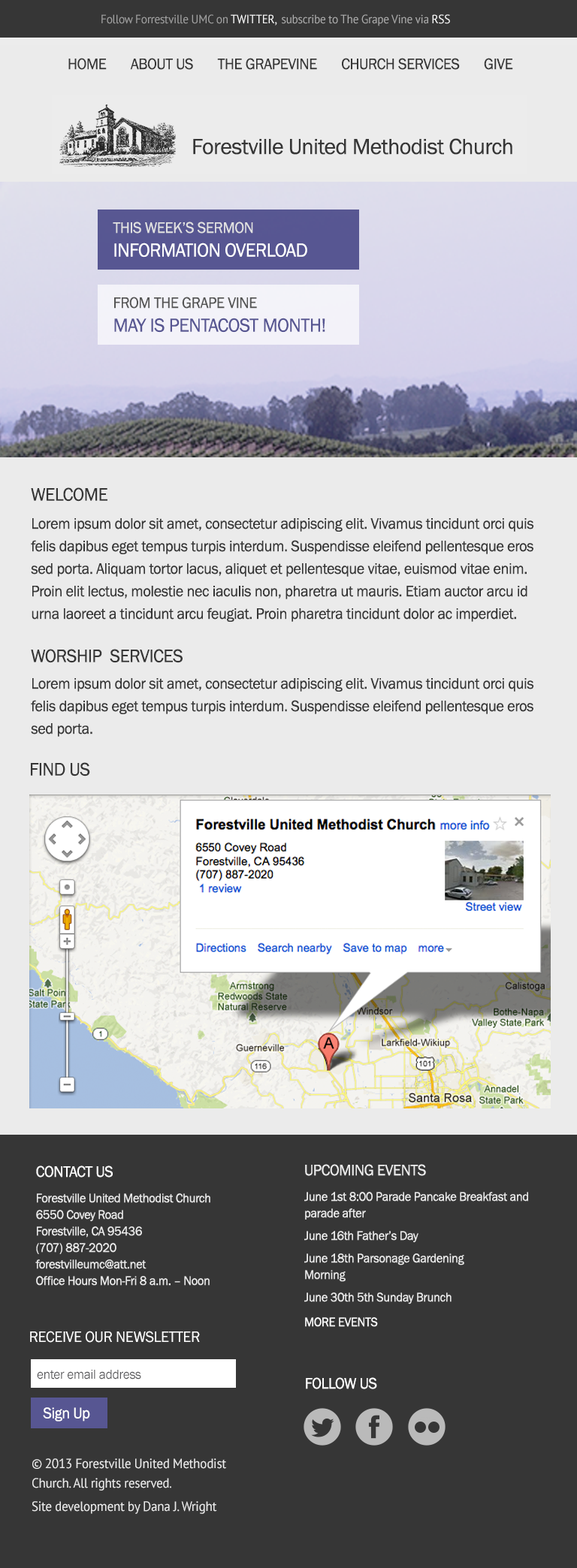
<style>
.page{position:relative;width:577px;height:1568px;background:#363636}
.page>*{position:absolute;margin:0}
.t1{font:15.8px "FranklinGothic-Book";letter-spacing:-0.02em;color:#363636;scale:0.96 1}
.t2{font:18.8px "FranklinGothic-Book";letter-spacing:-0.02em;color:#363636;scale:0.96 1}
.t3{font:15.8px/22.5px "FranklinGothic-Book";letter-spacing:-0.02em;color:#363636;scale:0.96 1}
.t4{font:12.8px/16.5px "FranklinGothic-Book";letter-spacing:-0.02em;color:#ebebeb;scale:0.96 1}
.t5{font:15.8px/6.5px "FranklinGothic-Book";letter-spacing:-0.02em;color:#ffffff;scale:0.96 1}
.t6{font:12.8px/25.5px "FranklinGothic-Book";letter-spacing:-0.02em;color:#ebebeb;scale:0.96 1}
.t7{font:12.8px/22.5px "FranklinGothic-Book";letter-spacing:-0.02em;color:#ebebeb;scale:0.96 1}
.t8{font:15.8px/15px "FranklinGothic-Book";letter-spacing:-0.02em;color:#ebebeb;scale:0.96 1}
.t9{font:12.8px/24.8px "FranklinGothic-Book";letter-spacing:-0.02em;color:#ffffff;scale:0.96 1}
.t10{font:15.8px "FranklinGothic-Book";letter-spacing:-0.02em;color:#ffffff;scale:0.96 1}
.t11{font:13.5px "FranklinGothic-Book";letter-spacing:-0.02em;color:#565659;scale:0.96 1}
.t12{font:13.5px/20px "PTSans-Regular";letter-spacing:-0.02em;color:#ebebeb;scale:0.96 1}
.t13{font:13.5px/23px "PTSans-Regular";letter-spacing:-0.02em;color:#ebebeb;scale:0.96 1}
</style>
<div class="page">
<p class="t1" style="left:68px;top:58px;width:445px;height:12px">HOME       ABOUT US       THE GRAPEVINE       CHURCH SERVICES       GIVE</p>
<p class="t2" style="left:31px;top:487px;width:76px;height:15px">WELCOME</p>
<p class="t3" style="left:31px;top:518px;width:503px;height:104px">Lorem ipsum dolor sit amet, consectetur adipiscing elit. Vivamus tincidunt orci quis felis dapibus eget tempus turpis interdum. Suspendisse eleifend pellentesque eros sed porta. Aliquam tortor lacus, aliquet et pellentesque vitae, euismod vitae enim. Proin elit lectus, molestie nec iaculis non, pharetra ut mauris. Etiam auctor arcu id urna laoreet a tincidunt arcu feugiat. Proin pharetra tincidunt dolor ac imperdiet.</p>
<p class="t2" style="left:31px;top:649px;width:151px;height:14px">WORSHIP  SERVICES</p>
<p class="t3" style="left:31px;top:678px;width:503px;height:59px">Lorem ipsum dolor sit amet, consectetur adipiscing elit. Vivamus tincidunt orci quis felis dapibus eget tempus turpis interdum. Suspendisse eleifend pellentesque eros sed porta.</p>
<p class="t2" style="left:31px;top:762px;width:59px;height:14px">FIND US</p>
<p class="t4" style="left:35px;top:1165px;width:175px;height:121px"><span class="t5">CONTACT US<br></span><span class="t6">Forestville United Methodist Church<br></span>6550 Covey Road<br>Forestville, CA 95436<br>(707) 887-2020<br>forestvilleumc@att.net<br>Office Hours Mon-Fri 8 a.m. – Noon</p>
<p class="t7" style="left:304px;top:1164px;width:224px;height:163px"><span class="t8">UPCOMING EVENTS<br></span><span class="t6">June 1st 8:00 Parade Pancake </span><span class="t4">Breakfast and parade after<br></span>June 16th Father’s Day<br>June 18th Parsonage Gardening<br><span class="t4">Morning<br></span>June 30th 5th Sunday Brunch<br><span class="t9">MORE EVENTS</span></p>
<p class="t10" style="left:30px;top:1331px;width:170px;height:12px">RECEIVE OUR NEWSLETTER</p>
<p class="t11" style="left:37px;top:1370px;width:104px;height:10px">enter email address</p>
<p class="t10" style="left:306px;top:1377px;width:71px;height:12px">FOLLOW US</p>
<p class="t10" style="left:43px;top:1407px;width:47px;height:15px">Sign Up</p>
<p class="t12" style="left:32px;top:1458px;width:194px;height:56px">© 2013 Forestville United Methodist Church. All rights reserved.  <br><span class="t13">Site development by Dana J. Wright</span></p>
</div>
